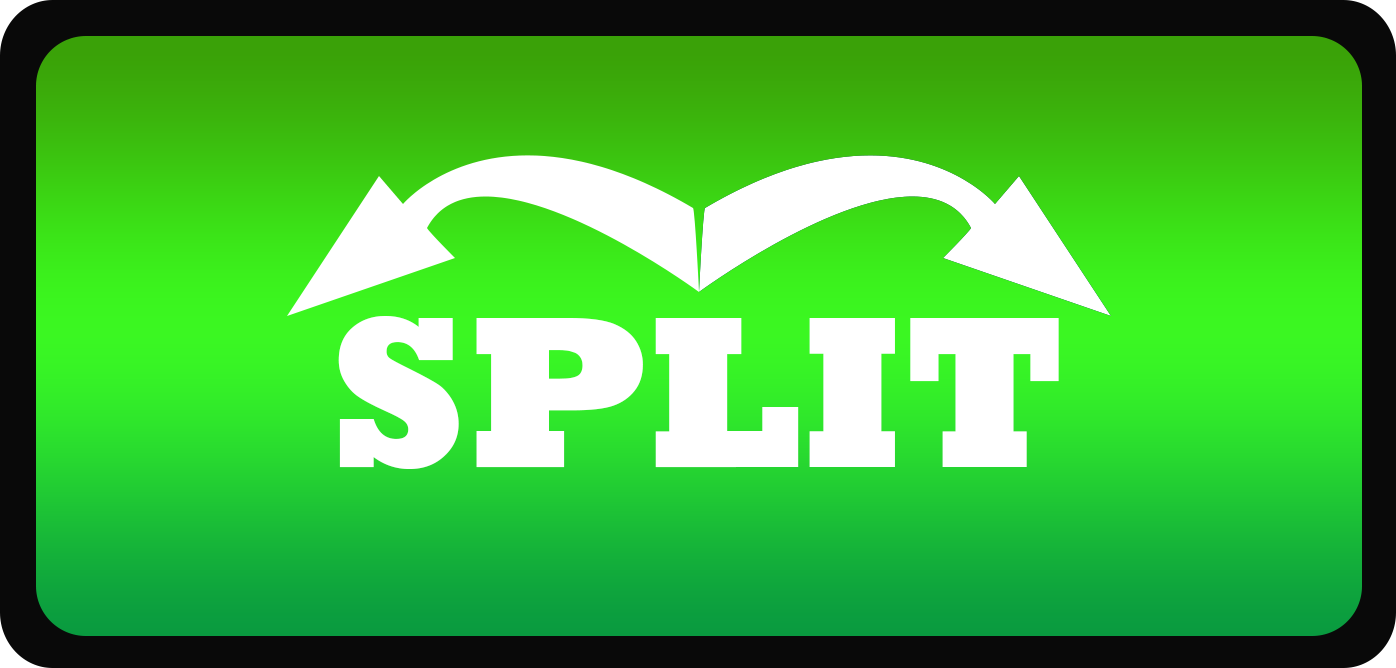
<style>
.page{position:relative;width:1396px;height:668px}
.page>*{position:absolute;margin:0}
.t1{font:219.8px "Rockwell-ExtraBold";color:#ffffff}
</style>
<div class="page">
<p class="t1" style="left:338px;top:316px;width:721px;height:153px">SPLIT</p>
</div>
